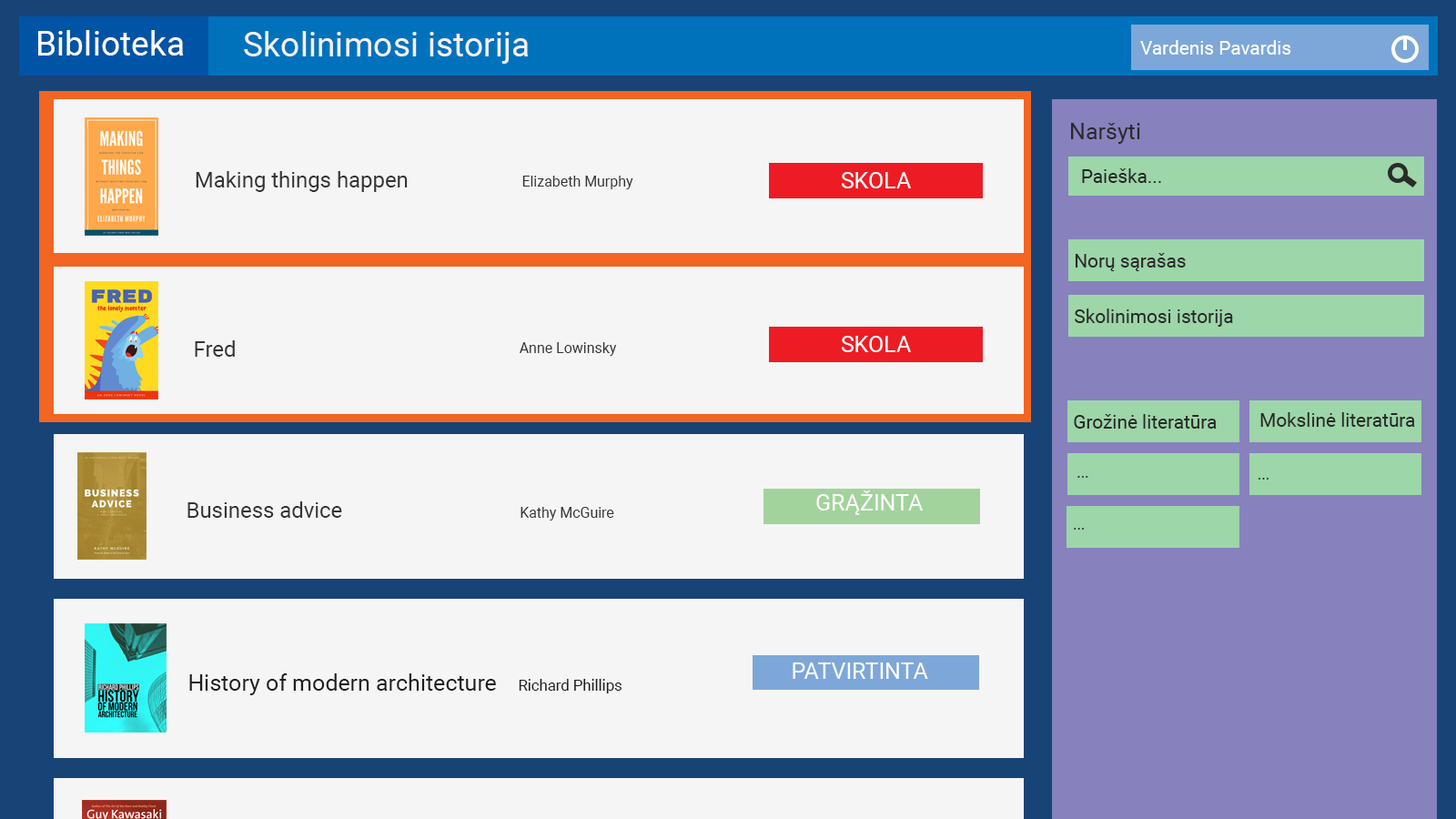
<style>
.page{position:relative;width:1456px;height:819px;background:#f5f5f5}
.page>*{position:absolute;margin:0}
.t1{font:34.1px "Roboto-Regular";color:#ffffff}
.t2{font:34.1px "Roboto-Regular";color:#f2f2f2}
.t3{font:19px "Roboto-Regular";color:#ffffff}
.t4{font:22.7px "Roboto-Regular";color:#292929}
.t5{font:21.7px "Roboto-Regular";color:#343434}
.t6{font:22.7px "Roboto-Regular";color:#ffffff}
.t7{font:19px "Roboto-Regular";color:#262626}
.t8{font:14.5px "Roboto-Regular";color:#343434}
.t9{font:19px "Roboto-Regular";color:#292929}
.t10{font:15.2px "Roboto-Regular";color:#292929}
.t11{font:22.7px "Roboto-Regular";color:#1d1d1d}
.t12{font:15.2px "Roboto-Regular";color:#1d1d1d}
</style>
<div class="page">
<p class="t1" style="left:38px;top:30px;width:146px;height:26px">Biblioteka</p>
<p class="t2" style="left:244px;top:31px;width:285px;height:33px">Skolinimosi istorija</p>
<p class="t3" style="left:1140px;top:40px;width:151px;height:15px">Vardenis Pavardis</p>
<p class="t4" style="left:1071px;top:123px;width:69px;height:21px">Naršyti</p>
<p class="t5" style="left:196px;top:171px;width:212px;height:21px">Making things happen</p>
<p class="t6" style="left:842px;top:172px;width:69px;height:16px">SKOLA</p>
<p class="t7" style="left:1082px;top:168px;width:79px;height:15px">Paieška...</p>
<p class="t8" style="left:522px;top:176px;width:111px;height:13px">Elizabeth Murphy</p>
<p class="t9" style="left:1075px;top:253px;width:111px;height:18px">Norų sąrašas</p>
<p class="t9" style="left:1075px;top:308px;width:158px;height:19px">Skolinimosi istorija</p>
<p class="t5" style="left:195px;top:340px;width:40px;height:17px">Fred</p>
<p class="t6" style="left:842px;top:336px;width:69px;height:16px">SKOLA</p>
<p class="t8" style="left:520px;top:342px;width:97px;height:14px">Anne Lowinsky</p>
<p class="t9" style="left:1260px;top:412px;width:155px;height:15px">Mokslinė literatūra</p>
<p class="t9" style="left:1074px;top:414px;width:143px;height:15px">Grožinė literatūra</p>
<p class="t10" style="left:1077px;top:476px;width:11px;height:2px">...</p>
<p class="t10" style="left:1259px;top:478px;width:10px;height:2px">...</p>
<p class="t6" style="left:816px;top:490px;width:107px;height:25px">GRĄŽINTA</p>
<p class="t5" style="left:187px;top:501px;width:155px;height:17px">Business advice</p>
<p class="t8" style="left:521px;top:507px;width:93px;height:14px">Kathy McGuire</p>
<p class="t10" style="left:1074px;top:528px;width:10px;height:2px">...</p>
<p class="t6" style="left:793px;top:662px;width:135px;height:17px">PATVIRTINTA</p>
<p class="t11" style="left:189px;top:673px;width:307px;height:22px">History of modern architecture</p>
<p class="t12" style="left:519px;top:679px;width:103px;height:14px">Richard Phillips</p>
</div>
